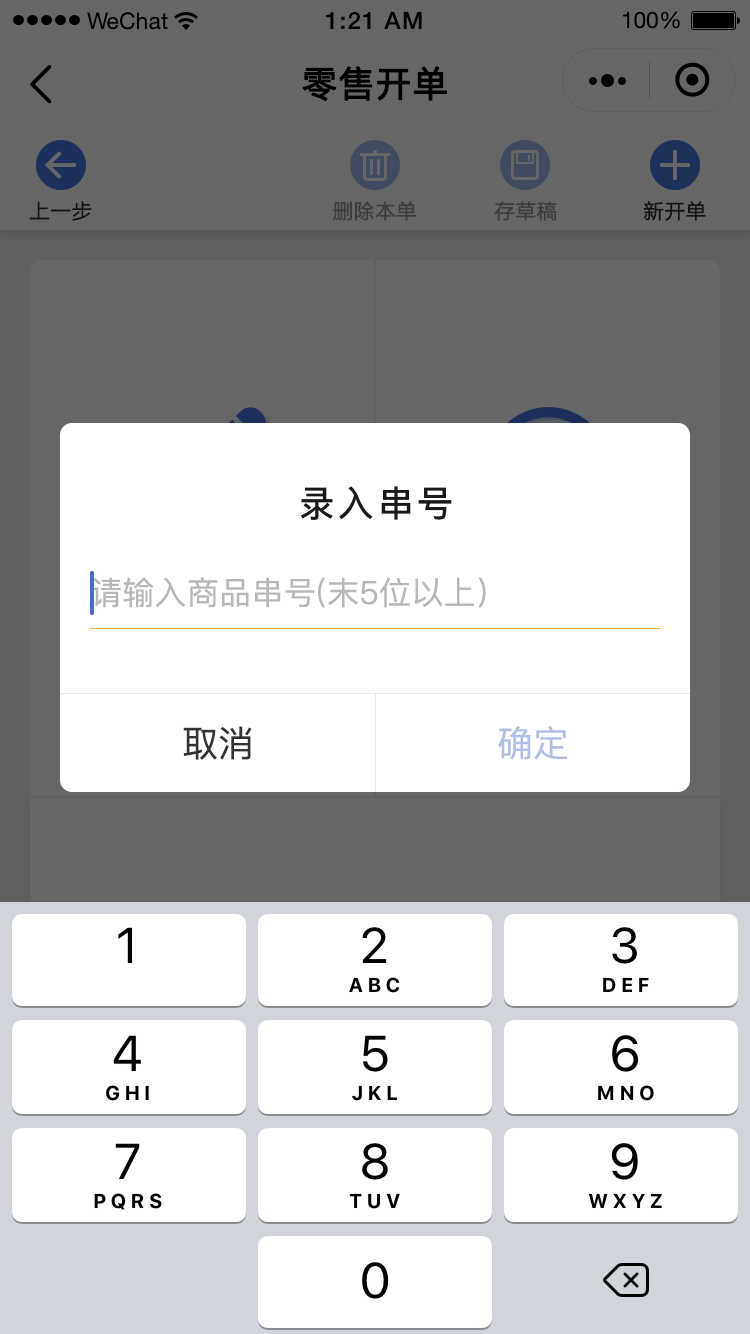
<style>
.page{position:relative;width:750px;height:1334px;background:#ffffff}
.page>*{position:absolute;margin:0}
.t1{font:36px "PingFang-SC-Medium";color:#000000;font-weight:bold}
.t2{font:20px "STHeitiSC-Medium";color:#141414;font-weight:bold}
.t3{font:20px "STHeitiSC-Medium";color:#333333;font-weight:bold}
.t4{font:36px "PingFang-SC-Bold";letter-spacing:0.1em;color:#1a1a1a}
.t5{font:32px "PingFang-SC-Medium";letter-spacing:0.01em;color:#b8b8b8}
.t6{font:36px "PingFang-SC-Medium";color:#333333}
.t7{font:36px "PingFang-SC-Medium";color:#b2bfe5}
</style>
<div class="page">
<p class="t1" style="left:302px;top:66px;width:145px;height:36px">零售开单</p>
<p class="t2" style="left:29px;top:201px;width:63px;height:20px">上一步</p>
<p class="t3" style="left:333px;top:201px;width:84px;height:20px">删除本单</p>
<p class="t3" style="left:494px;top:201px;width:63px;height:20px">存草稿</p>
<p class="t2" style="left:643px;top:201px;width:63px;height:20px">新开单</p>
<p class="t4" style="left:301px;top:486px;width:151px;height:34px">录入串号</p>
<p class="t5" style="left:91px;top:577px;width:395px;height:31px">请输入商品串号(末5位以上）</p>
<p class="t6" style="left:183px;top:726px;width:69px;height:34px">取消</p>
<p class="t7" style="left:498px;top:726px;width:70px;height:34px">确定</p>
</div>
